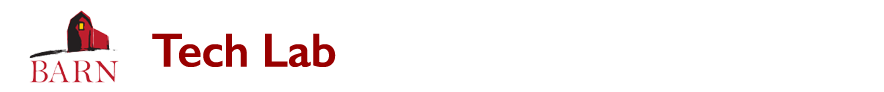
<style>
.page{position:relative;width:884px;height:92px;background:#ffffff}
.page>*{position:absolute;margin:0}
.t1{font:48px "GillSans-SemiBold";letter-spacing:-0.01em;color:#990000}
</style>
<div class="page">
<p class="t1" style="left:152px;top:33px;width:184px;height:34px">Tech Lab</p>
</div>
